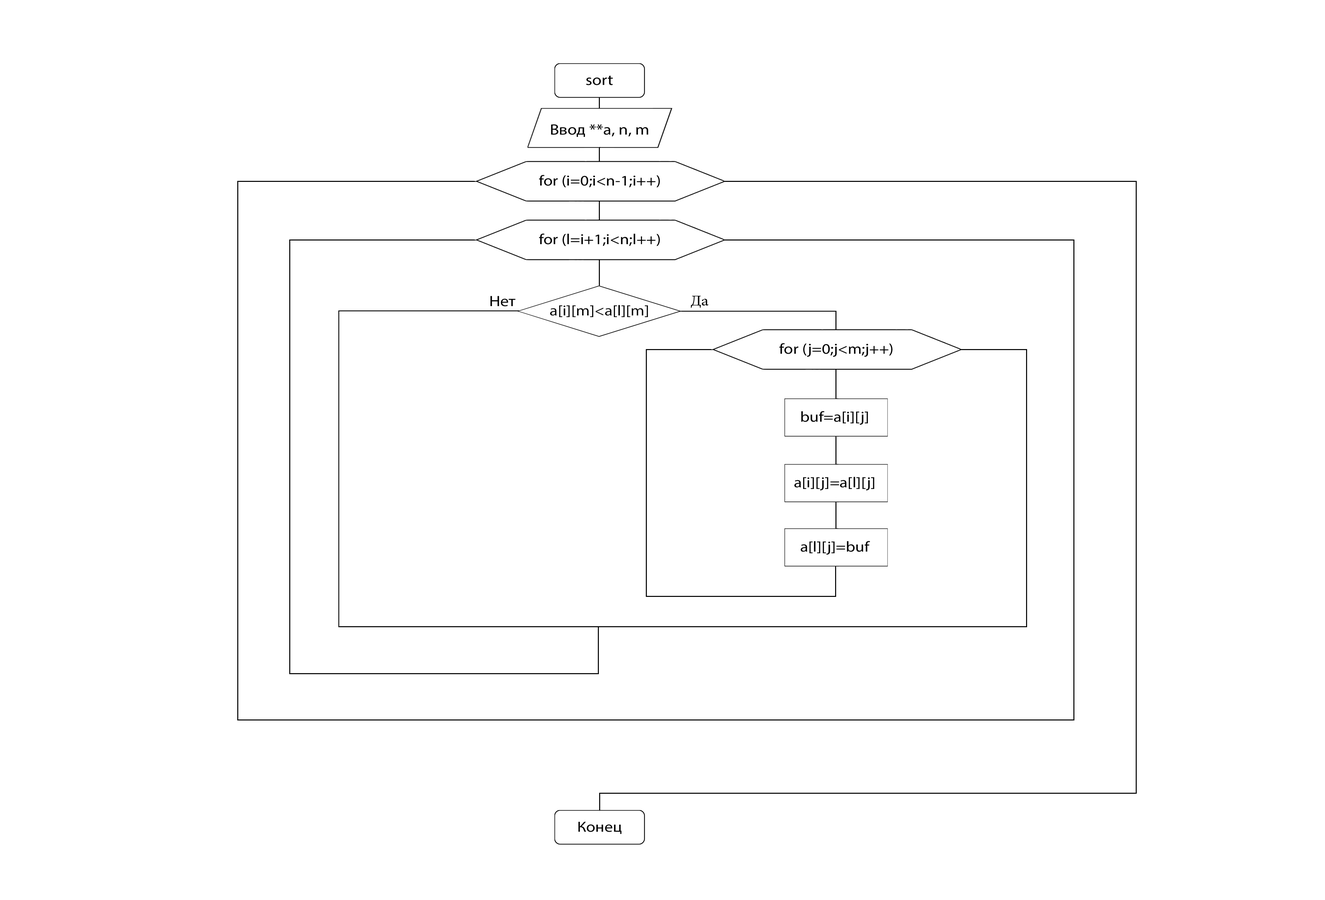
<style>
.page{position:relative;width:1325px;height:900px;background:#ffffff}
.page>*{position:absolute;margin:0}
.t1{font:14.9px "MyriadPro-Regular";color:#000000;scale:1.14 1}
.t2{font:14.7px "MyriadPro-Regular";color:#000000;scale:1.14 1}
.t3{font:14.9px "MyriadPro-Regular";color:#000000;scale:1.13 1}
</style>
<div class="page">
<p class="t1" style="left:586px;top:76px;width:27px;height:9px">sort</p>
<p class="t1" style="left:551px;top:124px;width:97px;height:13px">Ввод **a, n, m</p>
<p class="t2" style="left:539px;top:175px;width:121px;height:13px">for (i=0;i&lt;n-1;i++)</p>
<p class="t2" style="left:539px;top:234px;width:121px;height:12px">for (l=i+1;i&lt;n;l++)</p>
<p class="t3" style="left:490px;top:296px;width:25px;height:11px">Нет</p>
<p class="t2" style="left:550px;top:305px;width:98px;height:12px">a[i][m]&lt;a[l][m]</p>
<p class="t2" style="left:779px;top:343px;width:113px;height:14px">for (j=0;j&lt;m;j++)</p>
<p class="t2" style="left:801px;top:411px;width:67px;height:14px">buf=a[i][j]</p>
<p class="t2" style="left:794px;top:477px;width:80px;height:14px">a[i][j]=a[l][j]</p>
<p class="t2" style="left:800px;top:541px;width:70px;height:14px">a[l][j]=buf</p>
<p class="t2" style="left:578px;top:822px;width:43px;height:12px">Конец</p>
</div>
